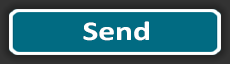
<style>
.page{position:relative;width:230px;height:64px;background:#016b82}
.page>*{position:absolute;margin:0}
.t1{font:27.3px "Calibri-Bold";color:#ffffff;scale:1.22 1}
</style>
<div class="page">
<p class="t1" style="left:83px;top:21px;width:66px;height:20px">Send</p>
</div>
